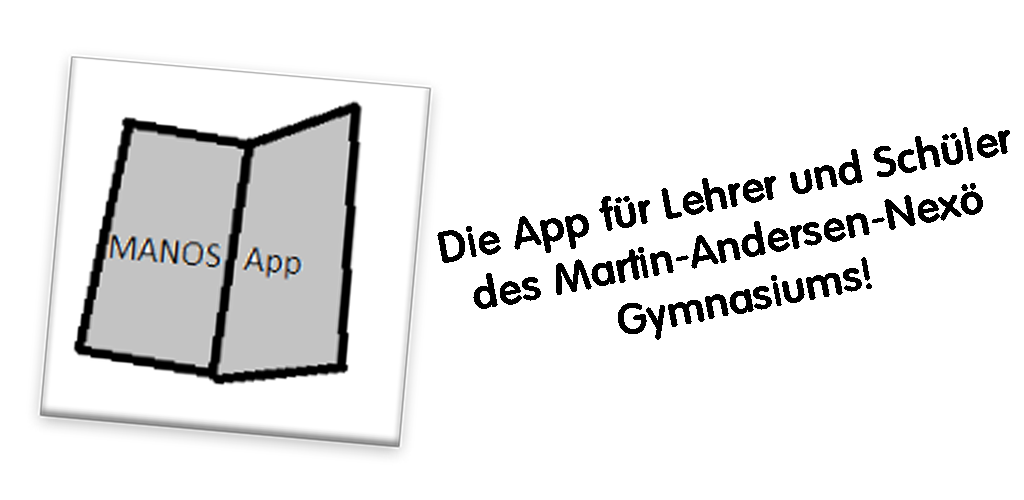
<style>
.page{position:relative;width:1024px;height:500px;background:#ffffff}
.page>*{position:absolute;margin:0}
.t1{font:44.2px "ElementaryHeavySFBold";color:#000000}
</style>
<div class="page">
<p class="t1" style="left:437px;top:127px;width:573px;height:213px;text-align:center;rotate:-11deg">Die App für Lehrer und Schüler<br>des Martin-Andersen-Nexö <br>Gymnasiums!</p>
</div>
